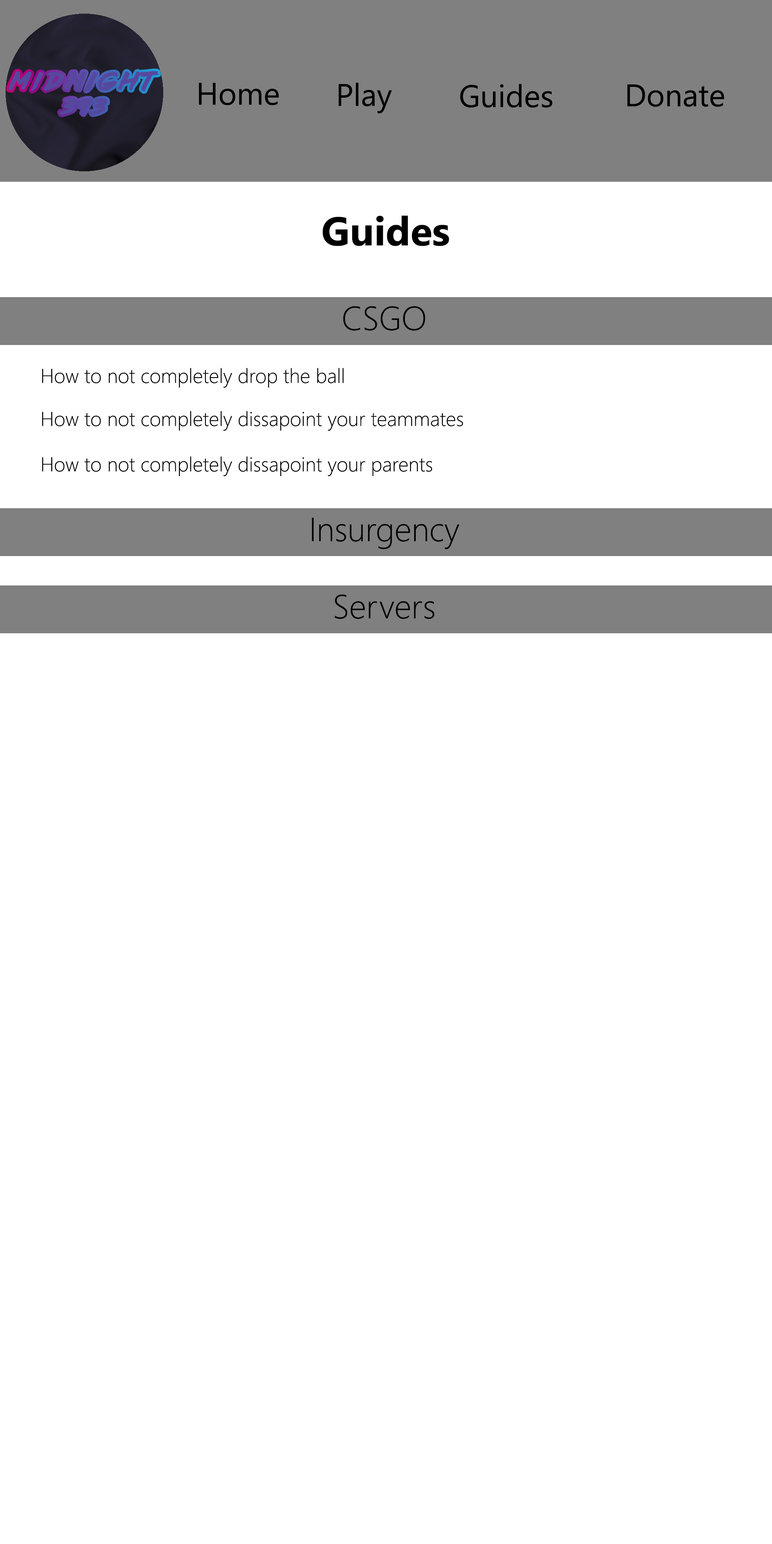
<style>
.page{position:relative;width:772px;height:1544px;background:#ffffff}
.page>*{position:absolute;margin:0}
.t1{font:22.3px "lazer84";letter-spacing:0.2em;color:#55489d}
.t2{font:31.3px "SegoeUI";color:#000000}
.t3{font:40.2px "SegoeUI-Bold";color:#000000}
.t4{font:33.5px "SegoeUI-Light";color:#000000}
.t5{font:20.1px "SegoeUI-Light";color:#000000}
</style>
<div class="page">
<p class="t1" style="left:8px;top:71px;width:151px;height:44px;text-align:center">Midnight<br>393</p>
<p class="t2" style="left:199px;top:83px;width:80px;height:22px">Home</p>
<p class="t2" style="left:339px;top:82px;width:53px;height:31px">Play</p>
<p class="t2" style="left:460px;top:84px;width:93px;height:24px">Guides</p>
<p class="t2" style="left:627px;top:84px;width:97px;height:23px">Donate</p>
<p class="t3" style="left:323px;top:216px;width:126px;height:30px">Guides</p>
<p class="t4" style="left:343px;top:306px;width:82px;height:25px">CSGO</p>
<p class="t5" style="left:42px;top:368px;width:302px;height:20px">How to not completely drop the ball</p>
<p class="t5" style="left:42px;top:411px;width:421px;height:20px">How to not completely dissapoint your teammates</p>
<p class="t5" style="left:42px;top:456px;width:390px;height:21px">How to not completely dissapoint your parents</p>
<p class="t4" style="left:312px;top:518px;width:148px;height:31px">Insurgency</p>
<p class="t4" style="left:335px;top:594px;width:100px;height:25px">Servers</p>
</div>
